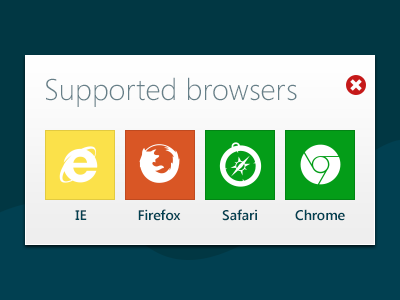
<style>
.page{position:relative;width:400px;height:300px;background:#013743}
.page>*{position:absolute;margin:0}
.t1{font:14px "SegoeUI-SemiBold";color:#014051}
</style>
<div class="page">
<p class="t1" style="left:138px;top:209px;width:43px;height:12px">Firefox</p>
<p class="t1" style="left:222px;top:209px;width:35px;height:12px">Safari</p>
<p class="t1" style="left:295px;top:209px;width:50px;height:12px">Chrome</p>
<p class="t1" style="left:75px;top:210px;width:12px;height:10px">IE</p>
</div>
